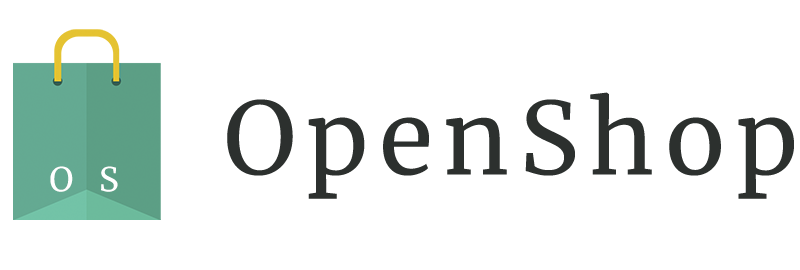
<style>
.page{position:relative;width:800px;height:270px;background:#ffffff}
.page>*{position:absolute;margin:0}
.t1{font:100px "Merriweather-Regular";letter-spacing:0.1em;color:#2c302e}
.t2{font:33.3px "Merriweather-Regular";letter-spacing:0.1em;color:#ffffff}
</style>
<div class="page">
<p class="t1" style="left:227px;top:92px;width:567px;height:107px">OpenShop</p>
<p class="t2" style="left:50px;top:166px;width:68px;height:26px">O  S</p>
</div>
